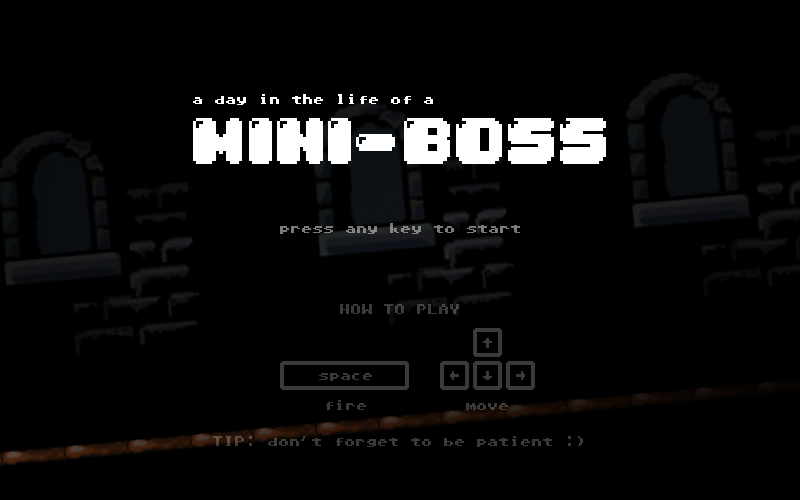
<style>
.page{position:relative;width:800px;height:500px;background:#000000}
.page>*{position:absolute;margin:0}
.t1{font:14px "Commodore-64-Pixelized";color:#ffffff}
.t2{font:56.3px "04b30";color:#ffffff}
.t3{font:14px "Commodore-64-Pixelized";color:#7a7a7a}
.t4{font:14px "Commodore-64-Pixelized";color:#3a3a3a}
.t5{font:13.8px "Commodore-64-Pixelized";color:#3a3a3a}
</style>
<div class="page">
<p class="t1" style="left:193px;top:94px;width:240px;height:11px">a day in the life of a</p>
<p class="t2" style="left:193px;top:118px;width:413px;height:46px">MINI-BOSS</p>
<p class="t3" style="left:280px;top:223px;width:240px;height:11px">press any key to start</p>
<p class="t4" style="left:340px;top:304px;width:119px;height:10px">HOW TO PLAY</p>
<p class="t4" style="left:483px;top:338px;width:9px;height:10px">^</p>
<p class="t4" style="left:319px;top:373px;width:53px;height:8px">space</p>
<p class="t5" style="left:450px;top:371px;width:9px;height:9px;rotate:-90deg">^</p>
<p class="t5" style="left:483px;top:371px;width:9px;height:9px;rotate:180deg">^</p>
<p class="t5" style="left:516px;top:371px;width:9px;height:9px;rotate:90deg">^</p>
<p class="t4" style="left:326px;top:400px;width:40px;height:10px">fire</p>
<p class="t4" style="left:466px;top:403px;width:42px;height:7px">move</p>
<p class="t4" style="left:213px;top:436px;width:370px;height:11px">TIP: don’t forget to be patient :)</p>
</div>
